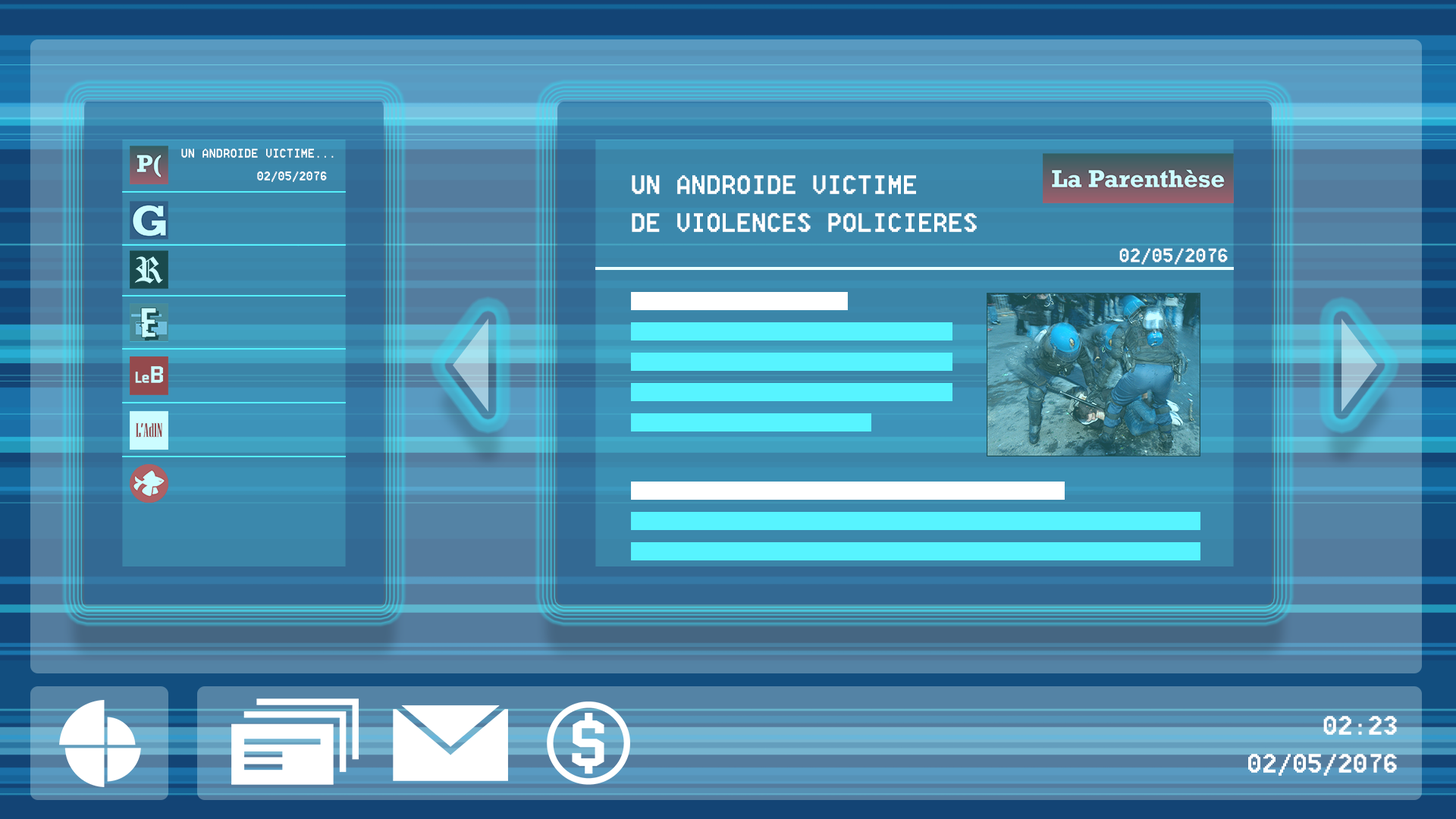
<style>
.page{position:relative;width:1456px;height:819px}
.page>*{position:absolute;margin:0}
.t1{font:15.5px "8514oem";color:#ffffff}
.t2{font:33.2px/37.9px "8514oem";color:#ffffff}
.t3{font:24px "8514oem";color:#ffffff}
</style>
<div class="page">
<p class="t1" style="left:181px;top:149px;width:153px;height:9px">UN ANDROIDE VICTIME...</p>
<p class="t1" style="left:257px;top:171px;width:70px;height:11px">02/05/2076</p>
<p class="t2" style="left:632px;top:175px;width:345px;height:57px">UN ANDROIDE VICTIME<br>DE VIOLENCES POLICIERES</p>
<p class="t3" style="left:1119px;top:248px;width:109px;height:17px">02/05/2076</p>
<p class="t2" style="left:1248px;top:716px;width:149px;height:60px;text-align:right">02:23<br>02/05/2076</p>
</div>
